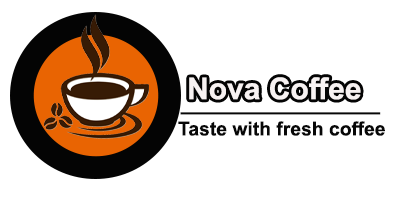
<style>
.page{position:relative;width:407px;height:199px;background:#ffffff}
.page>*{position:absolute;margin:0}
.t1{font:30px "Ah-One";color:#f7f2f2}
.t2{font:15px "Ah-One";color:#070707;scale:49.34 1}
.t3{font:19.3px "Ah-One";color:#070707}
</style>
<div class="page">
<p class="t1" style="left:189px;top:77px;width:172px;height:23px">Nova Coffee</p>
<p class="t2" style="left:180px;top:112px;width:201px;height:3px">-</p>
<p class="t3" style="left:178px;top:121px;width:207px;height:15px">Taste with fresh coffee</p>
</div>
